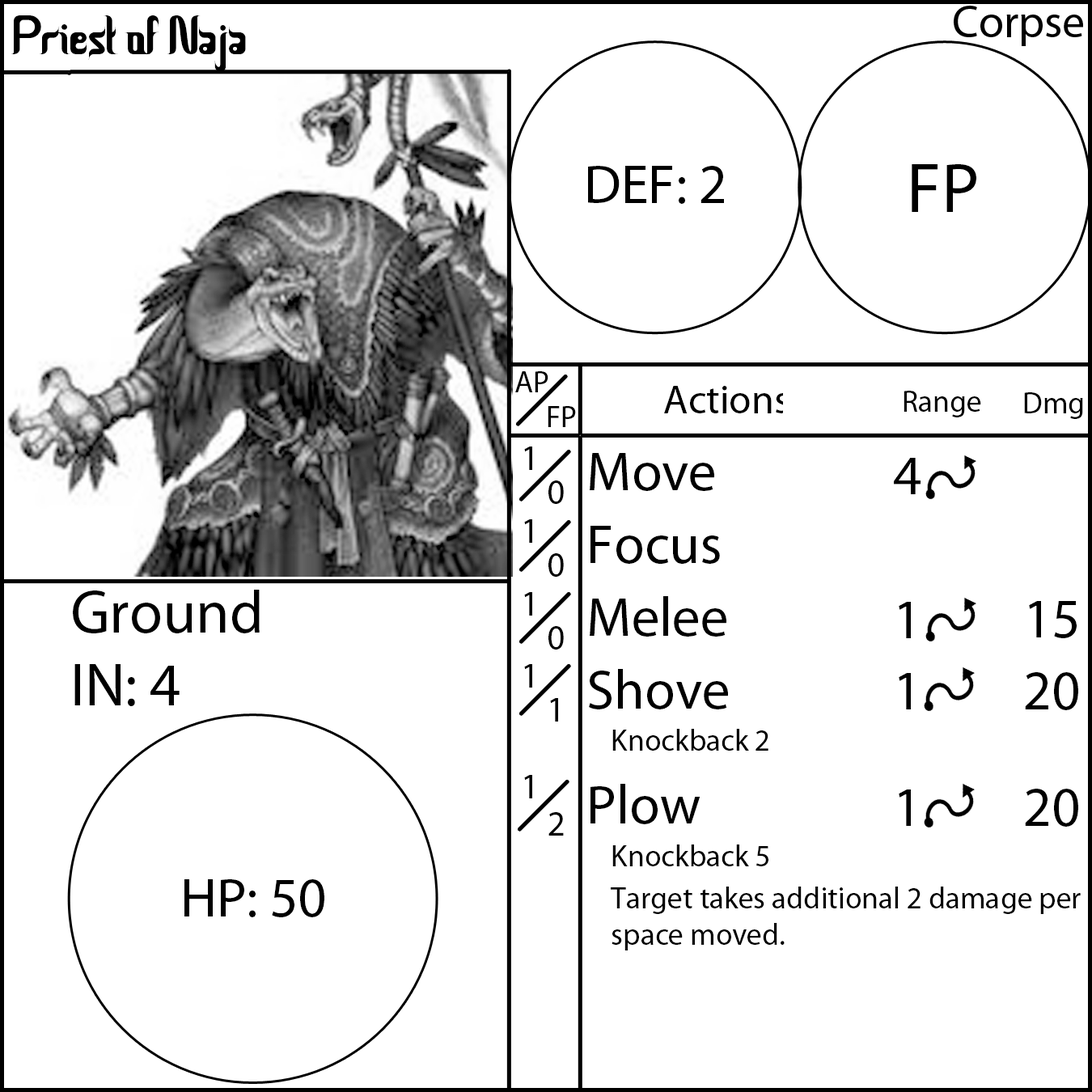
<style>
.page{position:relative;width:1092px;height:1092px;background:#ffffff}
.page>*{position:absolute;margin:0}
.t1{font:55.6px "CeriaLebaran";color:#000000}
.t2{font:55.6px "MyriadPro-Regular";color:#000000}
.t3{font:70.8px "MyriadPro-Regular";color:#000000}
.t4{font:30.3px "MyriadPro-Regular";color:#000000}
.t5{font:40.4px "MyriadPro-Regular";color:#000000}
.t6{font:35.4px "MyriadPro-Regular";color:#000000}
.t7{font:60.7px "MyriadPro-Regular";color:#000000}
</style>
<div class="page">
<p class="t1" style="left:11px;top:15px;width:235px;height:56px">Priest of Naja</p>
<p class="t2" style="left:588px;top:166px;width:136px;height:38px">DEF: 2</p>
<p class="t3" style="left:912px;top:164px;width:64px;height:48px">FP</p>
<p class="t4" style="left:515px;top:371px;width:33px;height:21px">AP</p>
<p class="t5" style="left:664px;top:386px;width:125px;height:27px">Actions</p>
<p class="t4" style="left:904px;top:391px;width:77px;height:26px">Range</p>
<p class="t4" style="left:1024px;top:392px;width:59px;height:27px">Dmg</p>
<p class="t4" style="left:548px;top:406px;width:28px;height:21px">FP</p>
<p class="t6" style="left:524px;top:447px;width:8px;height:351px">1<br>1<br>1<br>1<br>1</p>
<p class="t4" style="left:589px;top:453px;width:492px;height:497px"><span class="t2">Move<br>Focus<br>Melee<br>Shove<br></span> Knockback 2<br><span class="t2">Plow<br></span> Knockback 5<br> Target takes additional 2 damage per   space moved.</p>
<p class="t2" style="left:894px;top:458px;width:27px;height:368px;text-align:center">4<br><br>1<br>1<br>1</p>
<p class="t6" style="left:548px;top:480px;width:16px;height:356px">0<br>0<br>0<br>1<br>2</p>
<p class="t7" style="left:73px;top:590px;width:187px;height:116px">Ground<br>IN: 4</p>
<p class="t2" style="left:1025px;top:601px;width:53px;height:226px;text-align:center">15<br>20<br>20</p>
<p class="t2" style="left:184px;top:879px;width:140px;height:38px">HP: 50</p>
</div>
